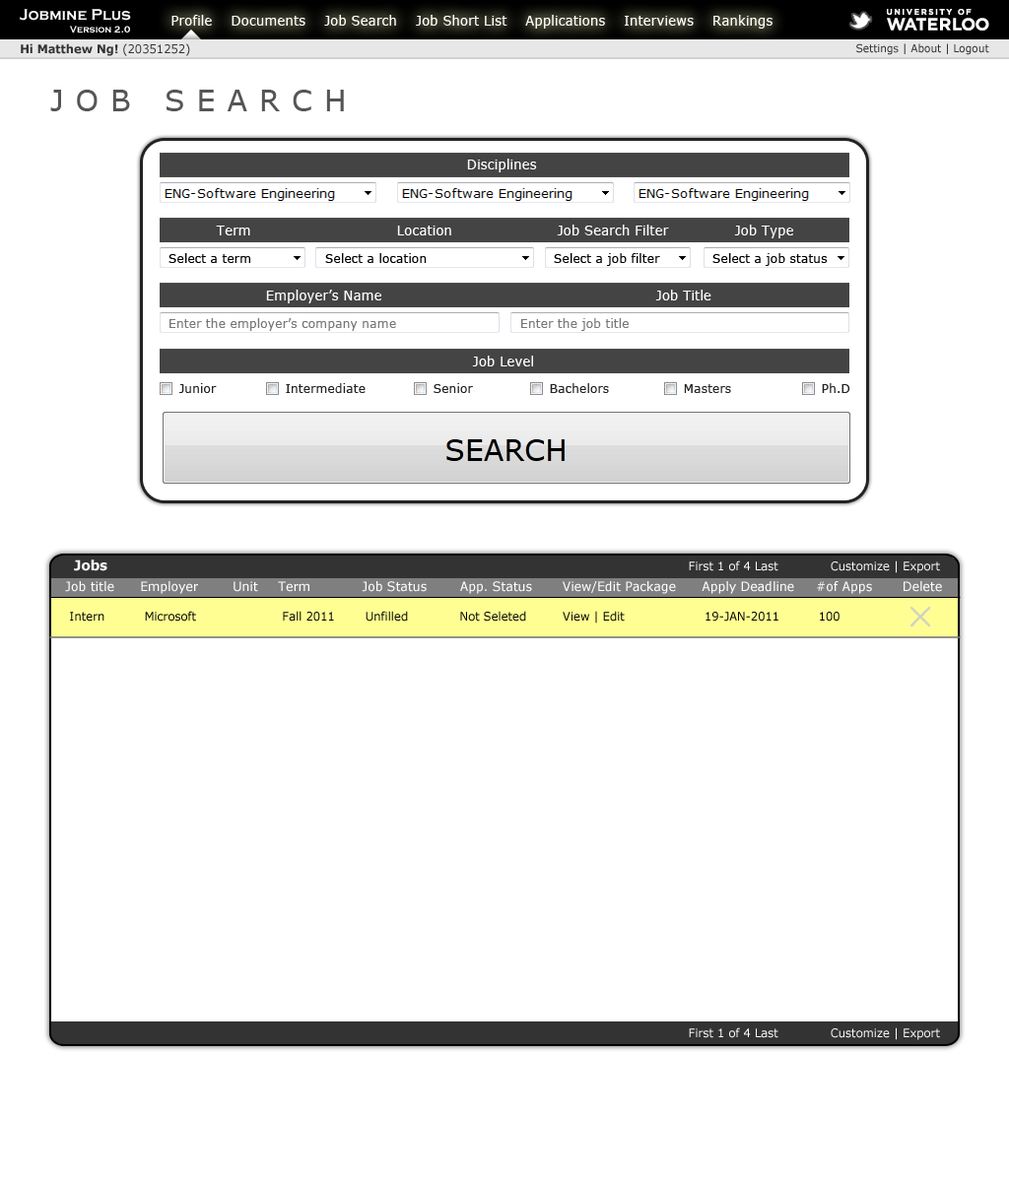
<style>
.page{position:relative;width:1009px;height:1182px;background:#ffffff}
.page>*{position:absolute;margin:0}
.t1{font:15.8px "CopperplateGothic-Bold";color:#ffffff;scale:0.96 1}
.t2{font:13.8px "Verdana";color:#ffffff;scale:0.96 1}
.t3{font:9.9px "CopperplateGothic-Bold";color:#ffffff;scale:0.96 1}
.t4{font:11.8px "Verdana-Bold";color:#333333;scale:0.96 1}
.t5{font:11.8px "Verdana";color:#333333;scale:0.96 1}
.t6{font:10.8px "Verdana";color:#333333;scale:0.96 1}
.t7{font:29.6px "Verdana";letter-spacing:0.4em;color:#555555}
.t8{font:12.8px "Verdana";color:#000000;scale:0.96 1}
.t9{font:12.8px "Verdana";color:#777777;scale:0.96 1}
.t10{font:12.8px "Verdana";color:#222222;scale:0.96 1}
.t11{font:13.8px "Verdana-Bold";color:#ffffff;scale:0.96 1}
.t12{font:11.8px "Verdana";color:#ffffff;scale:0.96 1}
.t13{font:12.8px "Verdana";color:#ffffff;scale:0.96 1}
.t14{font:11.8px "Verdana";color:#000000;scale:0.96 1}
</style>
<div class="page">
<p class="t1" style="left:19px;top:9px;width:112px;height:12px">Jobmine Plus</p>
<p class="t2" style="left:171px;top:15px;width:601px;height:14px">Profile    Documents    Job Search    Job Short List    Applications    Interviews    Rankings</p>
<p class="t3" style="left:69px;top:26px;width:61px;height:7px">Version 2.0</p>
<p class="t4" style="left:21px;top:43px;width:169px;height:13px">Hi Matthew Ng! <span class="t5">(20351252)</span></p>
<p class="t6" style="left:856px;top:43px;width:133px;height:12px">Settings | About | Logout</p>
<p class="t7" style="left:50px;top:90px;width:294px;height:21px">JOB SEARCH</p>
<p class="t2" style="left:467px;top:159px;width:70px;height:13px">Disciplines</p>
<p class="t2" style="left:216px;top:225px;width:577px;height:13px">Term      Location       Job Search Filter      Job Type</p>
<p class="t8" style="left:168px;top:253px;width:82px;height:10px">Select a term</p>
<p class="t8" style="left:325px;top:253px;width:102px;height:10px">Select a location</p>
<p class="t8" style="left:554px;top:253px;width:106px;height:13px">Select a job filter</p>
<p class="t8" style="left:712px;top:253px;width:115px;height:13px">Select a job status</p>
<p class="t2" style="left:266px;top:290px;width:445px;height:13px">Employer’s Name        Job Title</p>
<p class="t9" style="left:169px;top:318px;width:227px;height:13px">Enter the employer’s company name</p>
<p class="t9" style="left:521px;top:318px;width:107px;height:13px">Enter the job title</p>
<p class="t2" style="left:472px;top:356px;width:61px;height:10px">Job Level</p>
<p class="t10" style="left:178px;top:383px;width:39px;height:10px">Junior</p>
<p class="t10" style="left:286px;top:383px;width:79px;height:10px">Intermediate</p>
<p class="t10" style="left:433px;top:383px;width:40px;height:10px">Senior</p>
<p class="t10" style="left:550px;top:383px;width:59px;height:10px">Bachelors</p>
<p class="t10" style="left:684px;top:384px;width:47px;height:9px">Masters</p>
<p class="t10" style="left:822px;top:383px;width:28px;height:10px">Ph.D</p>
<p class="t11" style="left:74px;top:560px;width:33px;height:11px">Jobs</p>
<p class="t12" style="left:689px;top:561px;width:251px;height:12px">First 1 of 4 Last  Customize | Export</p>
<p class="t13" style="left:65px;top:581px;width:877px;height:13px">Job title      Employer        Unit  Term     Job Status   App. Status       View/Edit Package      Apply Deadline     #of Apps       Delete</p>
<p class="t14" style="left:70px;top:611px;width:769px;height:13px">Intern   Microsoft   Fall 2011    Unfilled  Not Seleted         View | Edit          19-JAN-2011  100</p>
<p class="t12" style="left:689px;top:1027px;width:251px;height:13px">First 1 of 4 Last  Customize | Export</p>
</div>
